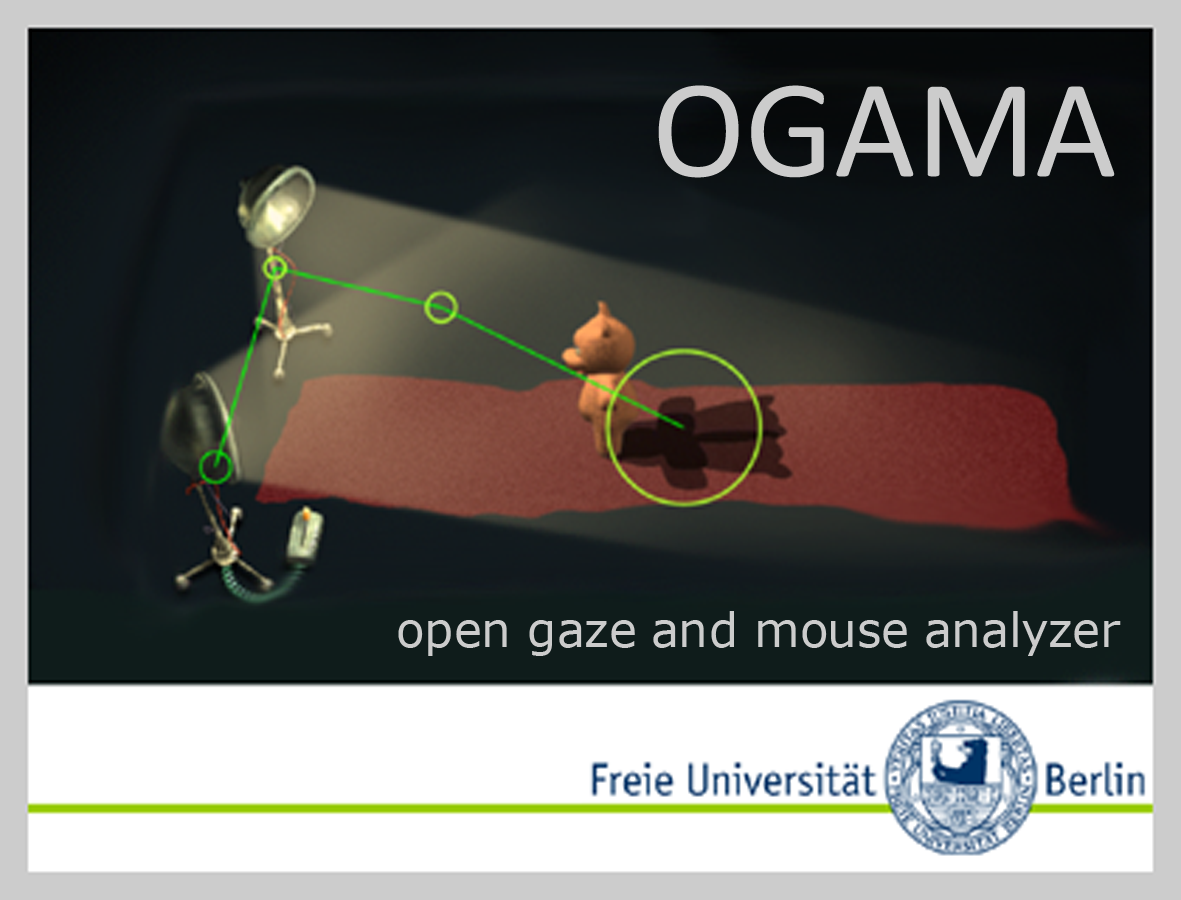
<style>
.page{position:relative;width:1181px;height:900px}
.page>*{position:absolute;margin:0}
.t1{font:140.6px "Calibri";color:#cccccc}
.t2{font:46.9px "Verdana";color:#cccccc}
</style>
<div class="page">
<p class="t1" style="left:658px;top:85px;width:457px;height:93px">OGAMA</p>
<p class="t2" style="left:398px;top:611px;width:723px;height:45px">open gaze and mouse analyzer</p>
</div>
